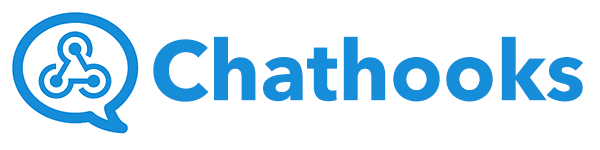
<style>
.page{position:relative;width:600px;height:150px;background:#ffffff}
.page>*{position:absolute;margin:0}
.t1{font:84px "AvenirNext-Bold";color:#168dd8}
</style>
<div class="page">
<p class="t1" style="left:153px;top:36px;width:431px;height:66px">Chathooks</p>
</div>
